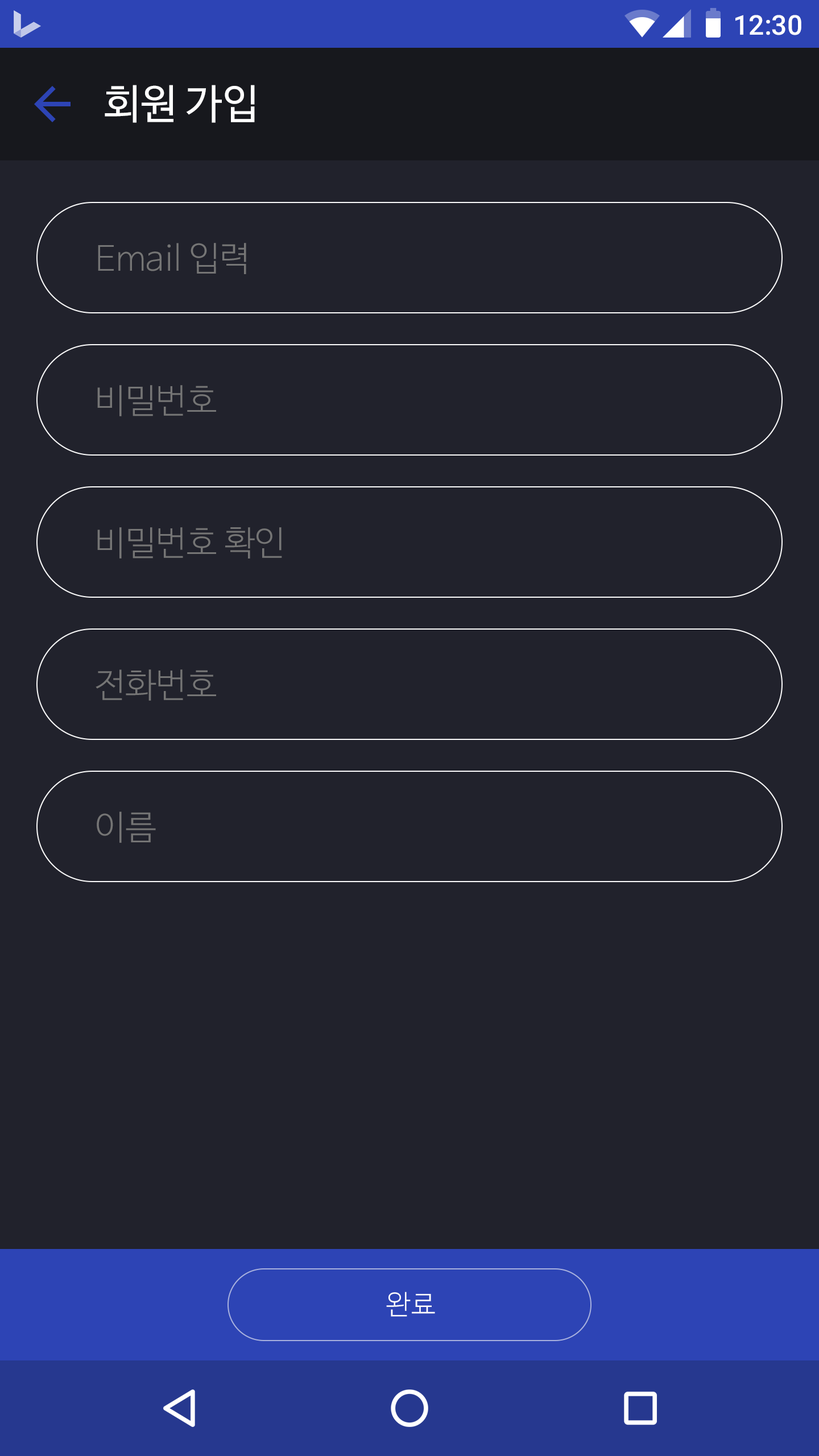
<style>
.page{position:relative;width:819px;height:1456px;background:#21222c}
.page>*{position:absolute;margin:0}
.t1{font:27.3px "Roboto-Medium";color:#ffffff}
.t2{font:40.9px "NanumBarunGothic";color:#ffffff}
.t3{font:34.1px "NanumBarunGothicLight";color:#757575}
.t4{font:27.3px "NanumBarunGothicLight";letter-spacing:0.025em;color:#ffffff}
</style>
<div class="page">
<p class="t1" style="left:735px;top:15px;width:66px;height:20px">12:30</p>
<p class="t2" style="left:105px;top:85px;width:150px;height:38px">회원 가입</p>
<p class="t3" style="left:98px;top:243px;width:148px;height:31px">Email 입력</p>
<p class="t3" style="left:97px;top:385px;width:119px;height:31px">비밀번호</p>
<p class="t3" style="left:97px;top:527px;width:185px;height:32px">비밀번호 확인</p>
<p class="t3" style="left:96px;top:669px;width:120px;height:32px">전화번호</p>
<p class="t3" style="left:97px;top:812px;width:59px;height:31px">이름</p>
<p class="t4" style="left:386px;top:1292px;width:49px;height:25px">완료</p>
</div>
